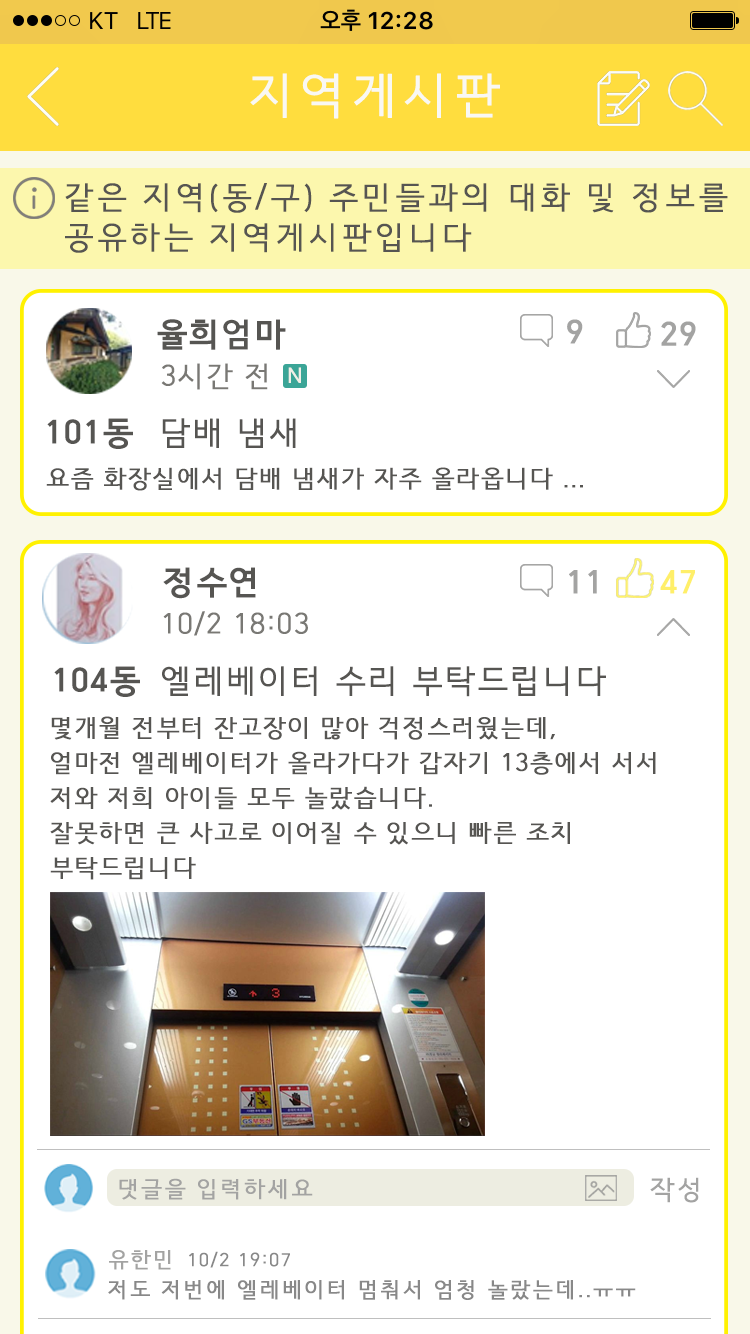
<style>
.page{position:relative;width:750px;height:1334px;background:#ffffff}
.page>*{position:absolute;margin:0}
.t1{font:48px "HCRDotum";letter-spacing:0.075em;color:#f9f8f3;text-transform:uppercase;font-weight:bold}
.t2{font:31px/40px "HCRDotum";letter-spacing:0.075em;color:#565552;text-transform:uppercase;font-weight:bold}
.t3{font:32px "HCRDotum-Bold";letter-spacing:0.025em;color:#565552;text-transform:uppercase;font-weight:bold}
.t4{font:32px "HCRDotum-Bold";letter-spacing:0.025em;color:#a3a3a2;text-transform:uppercase;font-weight:bold}
.t5{font:28px "HCRDotum";letter-spacing:0.025em;color:#797874;text-transform:uppercase;font-weight:bold}
.t6{font:21px "HCRDotum";letter-spacing:0.025em;color:#f1efe7;text-transform:uppercase;font-weight:bold}
.t7{font:32px "HCRDotum";letter-spacing:0.025em;color:#565552;text-transform:uppercase;font-weight:bold}
.t8{font:24px "HCRDotum";letter-spacing:0.025em;color:#565552;text-transform:uppercase;font-weight:bold}
.t9{font:32px "HCRDotum-Bold";letter-spacing:0.025em;color:#ffef69;text-transform:uppercase;font-weight:bold}
.t10{font:24px/35px "HCRDotum";letter-spacing:0.025em;color:#565552;text-transform:uppercase;font-weight:bold}
.t11{font:22px "HCRDotum";letter-spacing:0.075em;color:#a3a3a2;text-transform:uppercase;font-weight:bold}
.t12{font:26px "HCRDotum";letter-spacing:0.075em;color:#a3a3a2;text-transform:uppercase;font-weight:bold}
.t13{font:21px "HCRDotum";letter-spacing:0.075em;color:#a3a3a2;text-transform:uppercase;font-weight:bold}
.t14{font:18px "HCRDotum";letter-spacing:0.075em;color:#888888;text-transform:uppercase;font-weight:bold}
.t15{font:21px "HCRDotum";letter-spacing:0.075em;color:#888888;text-transform:uppercase;font-weight:bold}
</style>
<div class="page">
<p class="t1" style="left:250px;top:73px;width:250px;height:46px">지역게시판</p>
<p class="t2" style="left:65px;top:183px;width:663px;height:70px">같은 지역(동/구) 주민들과의 대화 및 정보를<br>공유하는 지역게시판입니다</p>
<p class="t3" style="left:157px;top:319px;width:129px;height:31px">율희엄마</p>
<p class="t4" style="left:567px;top:319px;width:16px;height:25px">9</p>
<p class="t4" style="left:661px;top:321px;width:35px;height:25px">29</p>
<p class="t5" style="left:161px;top:363px;width:107px;height:27px">3시간 전</p>
<p class="t6" style="left:288px;top:367px;width:13px;height:16px">N</p>
<p class="t3" style="left:47px;top:418px;width:86px;height:31px">101동</p>
<p class="t7" style="left:162px;top:418px;width:134px;height:30px">담배 냄새</p>
<p class="t8" style="left:46px;top:467px;width:537px;height:24px">요즘 화장실에서 담배 냄새가 자주 올라옵니다 ...</p>
<p class="t3" style="left:163px;top:567px;width:93px;height:32px">정수연</p>
<p class="t4" style="left:569px;top:570px;width:28px;height:24px">11</p>
<p class="t9" style="left:660px;top:570px;width:35px;height:24px">47</p>
<p class="t5" style="left:163px;top:611px;width:145px;height:25px">10/2 18:03</p>
<p class="t3" style="left:54px;top:666px;width:86px;height:31px">104동</p>
<p class="t7" style="left:162px;top:666px;width:444px;height:31px">엘레베이터 수리 부탁드립니다</p>
<p class="t10" style="left:50px;top:716px;width:606px;height:164px">몇개월 전부터 잔고장이 많아 걱정스러웠는데,<br>얼마전 엘레베이터가 올라가다가 갑자기 13층에서 서서 <br>저와 저희 아이들 모두 놀랐습니다.<br>잘못하면 큰 사고로 이어질 수 있으니 빠른 조치 <br>부탁드립니다</p>
<p class="t11" style="left:119px;top:1178px;width:194px;height:22px">댓글을 입력하세요</p>
<p class="t12" style="left:650px;top:1177px;width:49px;height:26px">작성</p>
<p class="t13" style="left:109px;top:1250px;width:62px;height:20px">유한민</p>
<p class="t14" style="left:189px;top:1251px;width:101px;height:17px">10/2 19:07</p>
<p class="t15" style="left:108px;top:1280px;width:528px;height:20px">저도 저번에 엘레베이터 멈춰서 엄청 놀랐는데..ㅠㅠ</p>
</div>
